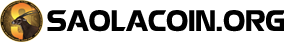
<style>
.page{position:relative;width:284px;height:42px;background:#ffffff}
.page>*{position:absolute;margin:0}
.t1{font:29px "UTM-Eremitage";color:#000000}
</style>
<div class="page">
<p class="t1" style="left:47px;top:10px;width:239px;height:22px">SAOLACOIN.ORG</p>
</div>
